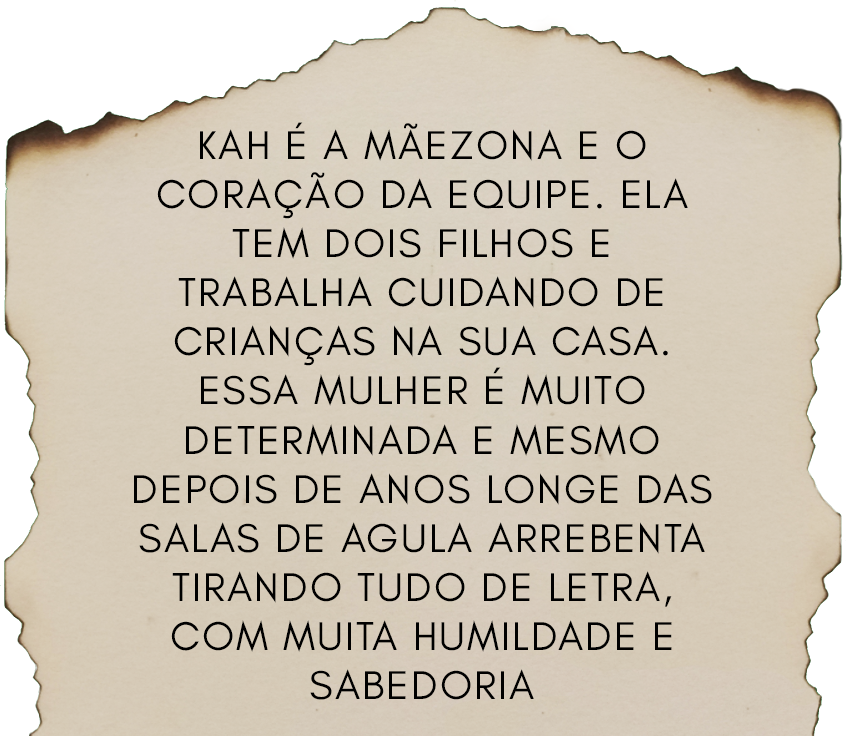
<style>
.page{position:relative;width:846px;height:736px}
.page>*{position:absolute;margin:0}
.t1{font:41px "GlacialIndifference-Regular";letter-spacing:0.05em;color:#000000;text-transform:uppercase}
</style>
<div class="page">
<p class="t1" style="left:134px;top:122px;width:578px;height:578px;text-align:center">kah é a mãezona e o<br>coração da equipe. ela<br>tem dois filhos e<br>trabalha cuidando de<br>crianças na sua casa.<br>essa mulher é muito<br>determinada e mesmo<br>depois de anos longe das<br>salas de agula arrebenta<br>tirando tudo de letra,<br>com muita humildade e<br>sabedoria</p>
</div>
